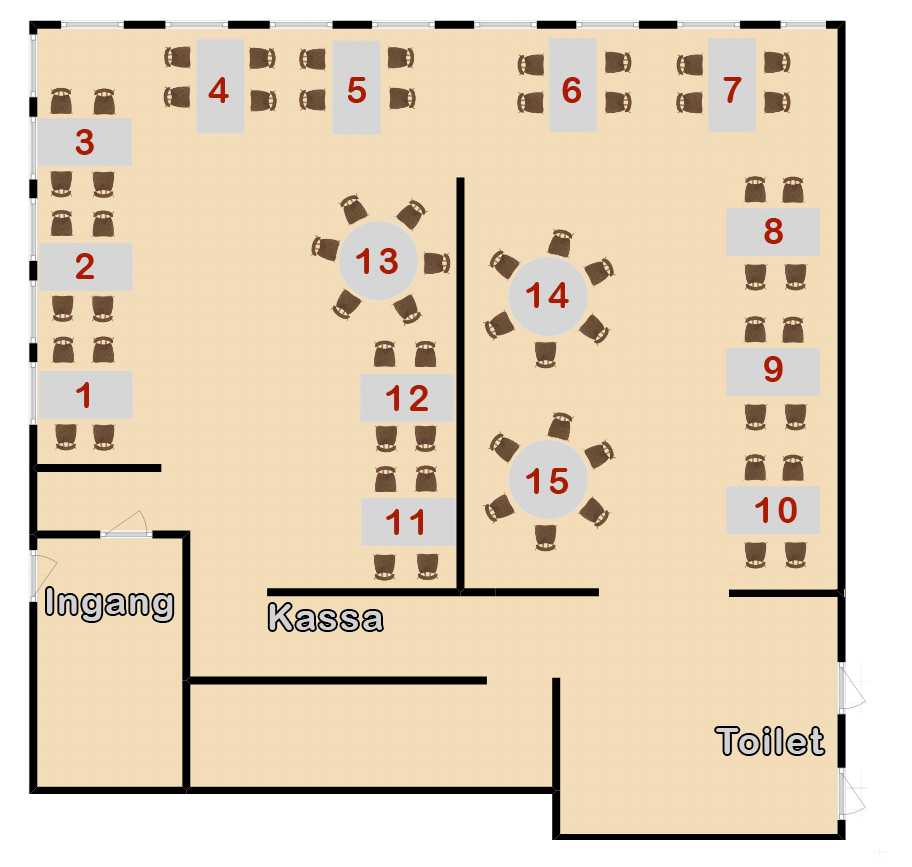
<style>
.page{position:relative;width:912px;height:867px;background:#f3dcb8}
.page>*{position:absolute;margin:0}
.t1{font:36.3px "ArialRoundedMTBold";letter-spacing:0.06em;color:#ab1b03}
.t2{font:36px "ArialRoundedMTBold";letter-spacing:0.06em;color:#d2d2d2}
.t3{font:36.3px "ArialRoundedMTBold";letter-spacing:0.06em;color:#d2d2d2}
</style>
<div class="page">
<p class="t1" style="left:208px;top:77px;width:21px;height:26px">4</p>
<p class="t1" style="left:347px;top:77px;width:19px;height:26px">5</p>
<p class="t1" style="left:562px;top:77px;width:19px;height:26px">6</p>
<p class="t1" style="left:723px;top:77px;width:19px;height:26px">7</p>
<p class="t1" style="left:75px;top:129px;width:19px;height:26px">3</p>
<p class="t1" style="left:764px;top:218px;width:19px;height:26px">8</p>
<p class="t1" style="left:76px;top:253px;width:18px;height:26px">2</p>
<p class="t1" style="left:356px;top:248px;width:42px;height:26px">13</p>
<p class="t1" style="left:526px;top:282px;width:43px;height:26px">14</p>
<p class="t1" style="left:764px;top:356px;width:19px;height:26px">9</p>
<p class="t1" style="left:76px;top:382px;width:13px;height:26px">1</p>
<p class="t1" style="left:386px;top:385px;width:42px;height:26px">12</p>
<p class="t1" style="left:526px;top:468px;width:42px;height:26px">15</p>
<p class="t1" style="left:755px;top:497px;width:42px;height:26px">10</p>
<p class="t1" style="left:386px;top:509px;width:37px;height:26px">11</p>
<p class="t2" style="left:47px;top:588px;width:126px;height:33px">Ingang</p>
<p class="t2" style="left:269px;top:604px;width:113px;height:26px">Kassa</p>
<p class="t3" style="left:716px;top:728px;width:108px;height:26px">Toilet</p>
</div>
